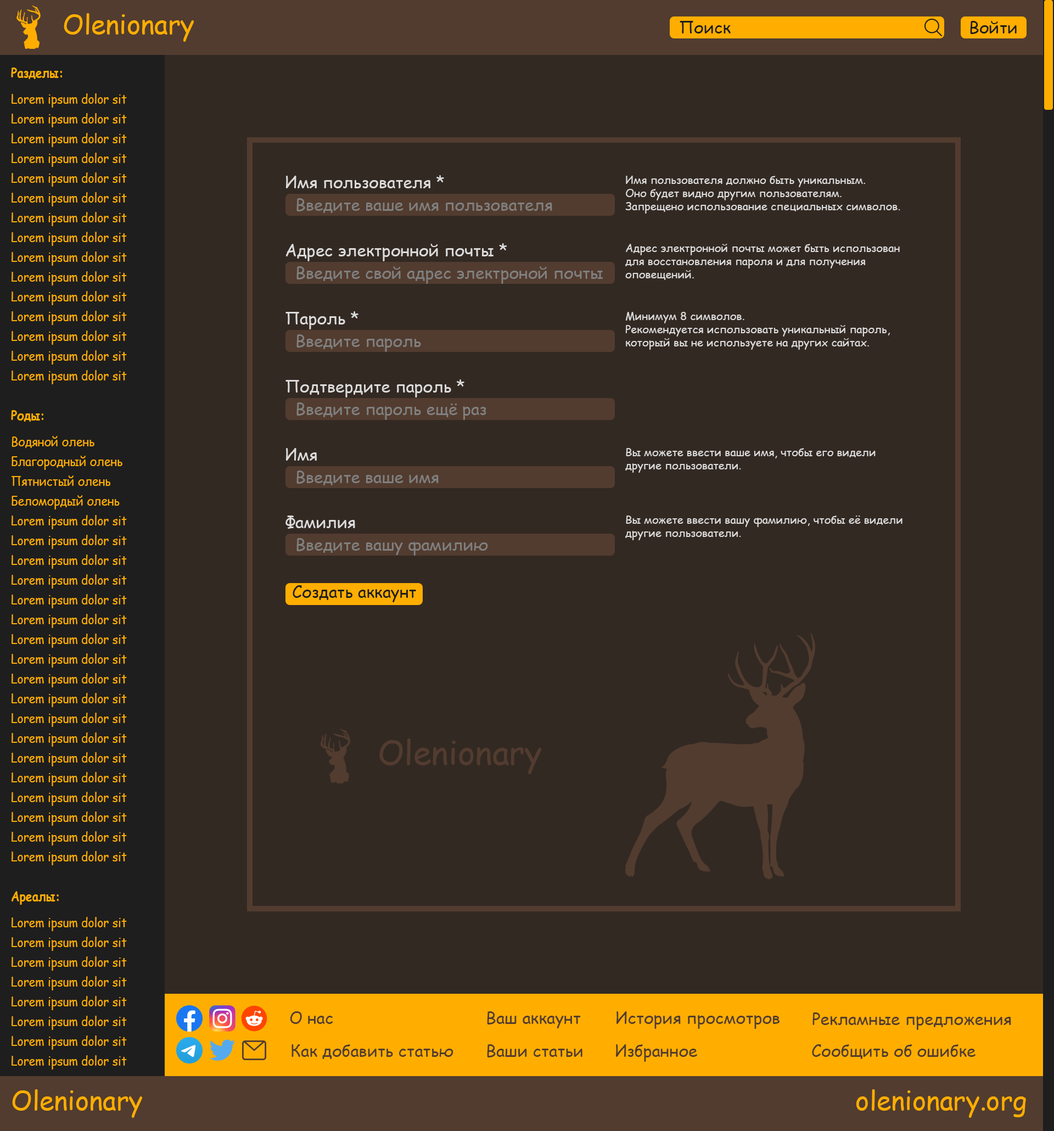
<style>
.page{position:relative;width:1054px;height:1131px;background:#332923}
.page>*{position:absolute;margin:0}
.t1{font:26.4px "ComicSansMS";color:#ffae00}
.t2{font:16.5px "ComicSansMS";color:#1e1e1e}
.t3{font:13.2px/19.8px "ComicSansMS";color:#ffae00;scale:0.88 1}
.t4{font:13.2px "ComicSansMS-Bold";color:#ffae00;scale:0.88 1}
.t5{font:13.2px/26.4px "ComicSansMS";color:#ffae00;scale:0.88 1}
.t6{font:13.2px/39.5px "ComicSansMS-Bold";color:#ffae00;scale:0.88 1}
.t7{font:16.5px "ComicSansMS";color:#dcdcdc}
.t8{font:11px/13.2px "ComicSansMS";color:#dcdcdc}
.t9{font:16.5px "ComicSansMS";color:#808080}
.t10{font:32.9px "ComicSansMS";color:#523c2f}
.t11{font:16.5px "ComicSansMS";color:#523c2f}
</style>
<div class="page">
<p class="t1" style="left:64px;top:13px;width:130px;height:29px">Olenionary</p>
<p class="t2" style="left:680px;top:21px;width:51px;height:12px">Поиск</p>
<p class="t2" style="left:970px;top:21px;width:47px;height:13px">Войти</p>
<p class="t3" style="left:11px;top:68px;width:116px;height:1002px"><span class="t4">Разделы:<br></span><span class="t5">Lorem ipsum dolor sit<br></span>Lorem ipsum dolor sit<br>Lorem ipsum dolor sit<br>Lorem ipsum dolor sit<br>Lorem ipsum dolor sit<br>Lorem ipsum dolor sit<br>Lorem ipsum dolor sit<br>Lorem ipsum dolor sit<br>Lorem ipsum dolor sit<br>Lorem ipsum dolor sit<br>Lorem ipsum dolor sit<br>Lorem ipsum dolor sit<br>Lorem ipsum dolor sit<br>Lorem ipsum dolor sit<br>Lorem ipsum dolor sit<br><span class="t6">Роды:<br></span><span class="t5">Водяной олень<br></span>Благородный олень<br>Пятнистый олень<br>Беломордый олень<br>Lorem ipsum dolor sit<br>Lorem ipsum dolor sit<br>Lorem ipsum dolor sit<br>Lorem ipsum dolor sit<br>Lorem ipsum dolor sit<br>Lorem ipsum dolor sit<br>Lorem ipsum dolor sit<br>Lorem ipsum dolor sit<br>Lorem ipsum dolor sit<br>Lorem ipsum dolor sit<br>Lorem ipsum dolor sit<br>Lorem ipsum dolor sit<br>Lorem ipsum dolor sit<br>Lorem ipsum dolor sit<br>Lorem ipsum dolor sit<br>Lorem ipsum dolor sit<br>Lorem ipsum dolor sit<br>Lorem ipsum dolor sit<br><span class="t6">Ареалы:<br></span><span class="t5">Lorem ipsum dolor sit<br></span>Lorem ipsum dolor sit<br>Lorem ipsum dolor sit<br>Lorem ipsum dolor sit<br>Lorem ipsum dolor sit<br>Lorem ipsum dolor sit<br>Lorem ipsum dolor sit<br>Lorem ipsum dolor sit</p>
<p class="t7" style="left:286px;top:175px;width:158px;height:13px">Имя пользователя *</p>
<p class="t8" style="left:625px;top:176px;width:275px;height:38px;text-align:justify">Имя пользователя должно быть уникальным.<br>Оно будет видно другим пользователям.<br>Запрещено использование специальных символов.</p>
<p class="t9" style="left:297px;top:198px;width:255px;height:15px">Введите ваше имя пользователя</p>
<p class="t7" style="left:286px;top:243px;width:221px;height:18px">Адрес электронной почты *</p>
<p class="t8" style="left:625px;top:244px;width:275px;height:36px;text-align:justify">Адрес электронной почты может быть использован<br>для восстановления пароля и для получения<br>оповещений.</p>
<p class="t9" style="left:297px;top:266px;width:306px;height:18px">Введите свой адрес электроной почты</p>
<p class="t7" style="left:286px;top:311px;width:73px;height:18px">Пароль *</p>
<p class="t8" style="left:625px;top:312px;width:265px;height:38px;text-align:justify">Минимум 8 символов.<br>Рекомендуется использовать уникальный пароль,<br>который вы не используете на других сайтах.</p>
<p class="t9" style="left:297px;top:334px;width:124px;height:18px">Введите пароль</p>
<p class="t7" style="left:286px;top:379px;width:179px;height:19px">Подтвердите пароль *</p>
<p class="t9" style="left:297px;top:402px;width:189px;height:18px">Введите пароль ещё раз</p>
<p class="t7" style="left:286px;top:448px;width:31px;height:13px">Имя</p>
<p class="t8" style="left:625px;top:448px;width:251px;height:25px;text-align:justify">Вы можете ввести ваше имя, чтобы его видели<br>другие пользователи.</p>
<p class="t9" style="left:297px;top:471px;width:142px;height:14px">Введите ваше имя</p>
<p class="t7" style="left:286px;top:516px;width:69px;height:13px">Фамилия</p>
<p class="t8" style="left:625px;top:516px;width:278px;height:24px;text-align:justify">Вы можете ввести вашу фамилию, чтобы её видели<br>другие пользователи.</p>
<p class="t9" style="left:297px;top:538px;width:191px;height:18px">Введите вашу фамилию</p>
<p class="t2" style="left:293px;top:585px;width:123px;height:17px">Создать аккаунт</p>
<p class="t10" style="left:379px;top:739px;width:162px;height:35px">Olenionary</p>
<p class="t11" style="left:290px;top:1011px;width:43px;height:13px">О нас</p>
<p class="t11" style="left:487px;top:1011px;width:94px;height:17px">Ваш аккаунт</p>
<p class="t11" style="left:616px;top:1011px;width:164px;height:18px">История просмотров</p>
<p class="t11" style="left:813px;top:1012px;width:198px;height:18px">Рекламные предложения</p>
<p class="t11" style="left:292px;top:1044px;width:162px;height:15px">Как добавить статью</p>
<p class="t11" style="left:487px;top:1044px;width:96px;height:14px">Ваши статьи</p>
<p class="t11" style="left:616px;top:1044px;width:81px;height:18px">Избранное</p>
<p class="t11" style="left:812px;top:1044px;width:164px;height:15px">Сообщить об ошибке</p>
<p class="t1" style="left:12px;top:1089px;width:130px;height:29px">Olenionary</p>
<p class="t1" style="left:856px;top:1089px;width:170px;height:29px">olenionary.org</p>
</div>
